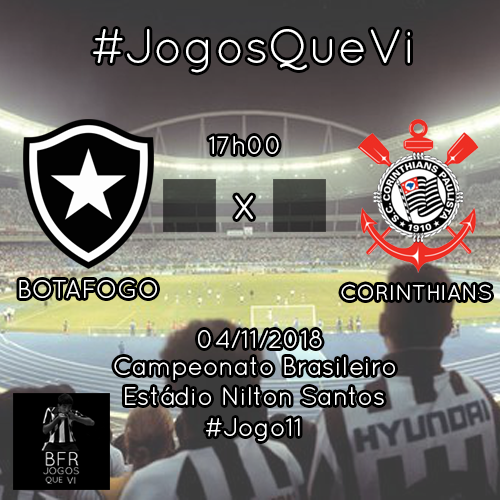
<style>
.page{position:relative;width:500px;height:500px}
.page>*{position:absolute;margin:0}
.t1{font:48px "QuicksandBook-Regular";color:#ffffff}
.t2{font:25px "QuicksandBook-Regular";color:#ffffff}
.t3{font:21.6px "QuicksandBook-Regular";color:#ffffff}
</style>
<div class="page">
<p class="t1" style="left:93px;top:29px;width:317px;height:44px">#JogosQueVi</p>
<p class="t2" style="left:209px;top:136px;width:70px;height:18px">17h00</p>
<p class="t1" style="left:235px;top:195px;width:18px;height:24px">x</p>
<p class="t2" style="left:19px;top:280px;width:138px;height:18px">BOTAFOGO</p>
<p class="t3" style="left:341px;top:284px;width:150px;height:16px">CORINTHIANS</p>
<p class="t2" style="left:198px;top:330px;width:124px;height:18px">04/11/2018</p>
<p class="t2" style="left:114px;top:357px;width:281px;height:23px">Campeonato Brasileiro</p>
<p class="t2" style="left:125px;top:387px;width:259px;height:18px">Estádio Nilton Santos</p>
<p class="t2" style="left:206px;top:418px;width:94px;height:23px">#Jogo11</p>
</div>
